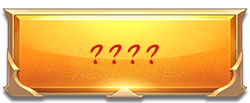
<style>
.page{position:relative;width:250px;height:103px}
.page>*{position:absolute;margin:0}
.t1{font:28px "FzBoldGame";color:#cc1a1a}
</style>
<div class="page">
<p class="t1" style="left:90px;top:44px;width:69px;height:21px">????</p>
</div>
